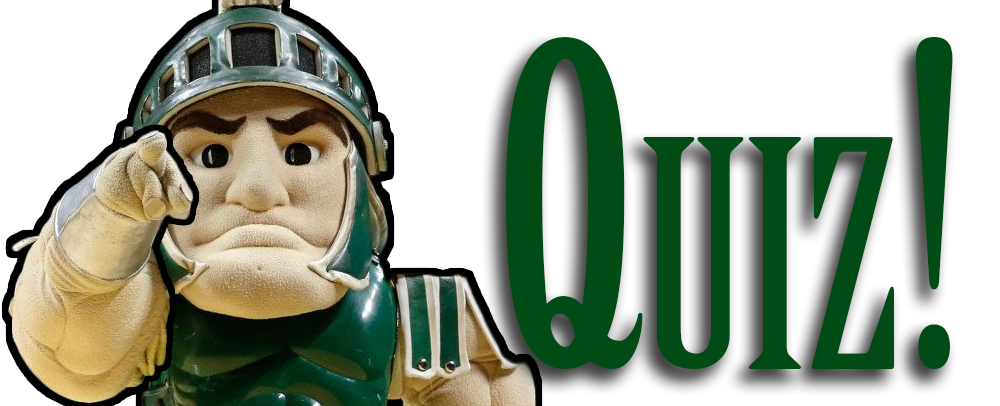
<style>
.page{position:relative;width:1000px;height:406px;background:#ffffff}
.page>*{position:absolute;margin:0}
.t1{font:442px "BirchStd";color:#014c16;font-variant:small-caps}
</style>
<div class="page">
<p class="t1" style="left:506px;top:37px;width:447px;height:333px">Quiz!</p>
</div>
